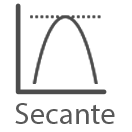
<style>
.page{position:relative;width:132px;height:132px;background:#ffffff}
.page>*{position:absolute;margin:0}
.t1{font:30px "MyriadPro-Regular";letter-spacing:0.01em;color:#585858}
</style>
<div class="page">
<p class="t1" style="left:15px;top:103px;width:100px;height:21px">Secante</p>
</div>
